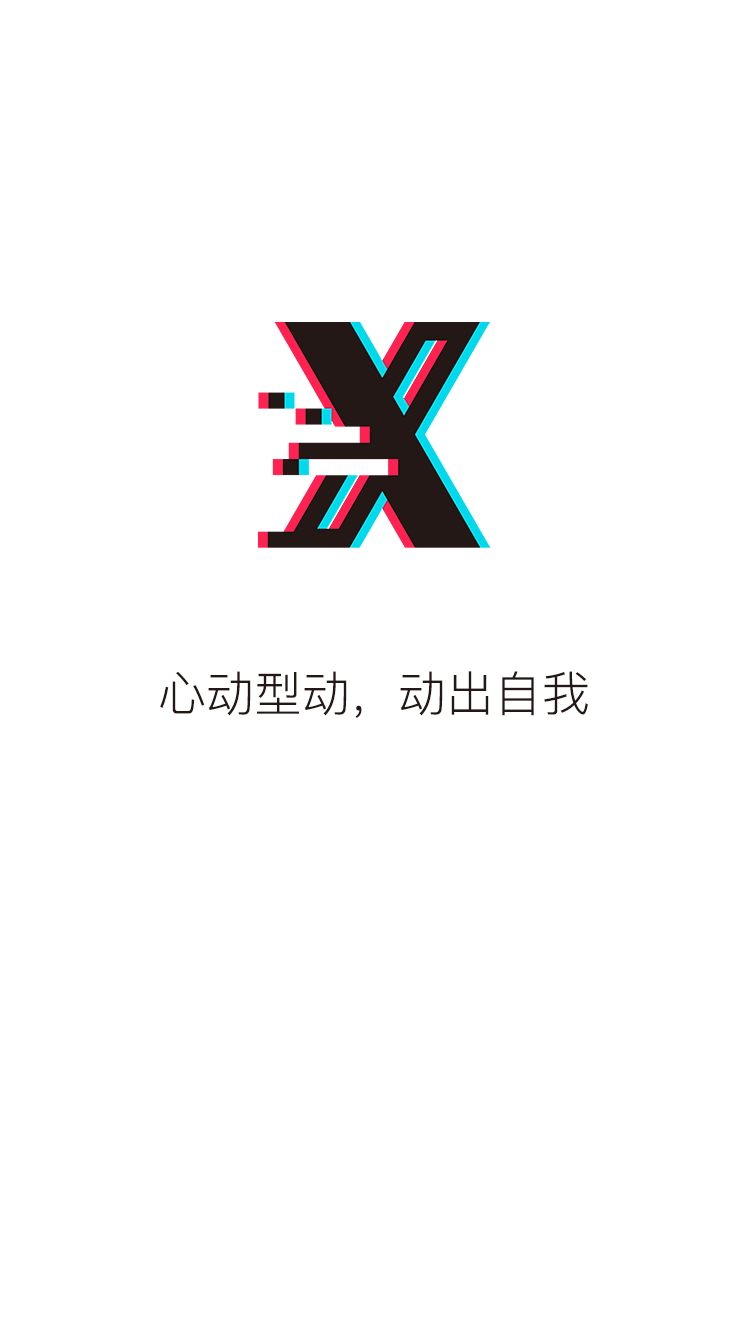
<style>
.page{position:relative;width:750px;height:1334px;background:#ffffff}
.page>*{position:absolute;margin:0}
.t1{font:48px "PingFang-SC-Regular";color:#231815}
</style>
<div class="page">
<p class="t1" style="left:160px;top:671px;width:428px;height:47px">心动型动，动出自我</p>
</div>
